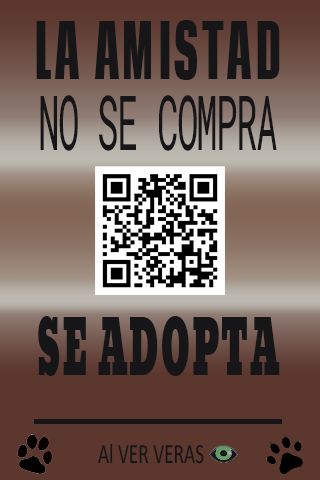
<style>
.page{position:relative;width:320px;height:480px;background:#5c372e}
.page>*{position:absolute;margin:0}
.t1{font:75.4px "CodaCaption-ExtraBold";color:#161618;scale:0.48 1}
.t2{font:75.9px "RobotoMono-Regular";letter-spacing:-0.05em;color:#161618;scale:0.47 1}
.t3{font:74.5px "Moul-Regular";letter-spacing:0.04em;color:#161618;scale:0.46 1}
.t4{font:28.1px "Calibri";color:#161618;scale:0.69 1}
</style>
<div class="page">
<p class="t1" style="left:36px;top:20px;width:244px;height:60px">LA AMISTAD</p>
<p class="t2" style="left:40px;top:95px;width:237px;height:56px">NO SE COMPRA</p>
<p class="t3" style="left:38px;top:316px;width:242px;height:60px">SE ADOPTA</p>
<p class="t4" style="left:98px;top:443px;width:106px;height:21px">Al VER VERAS</p>
</div>
